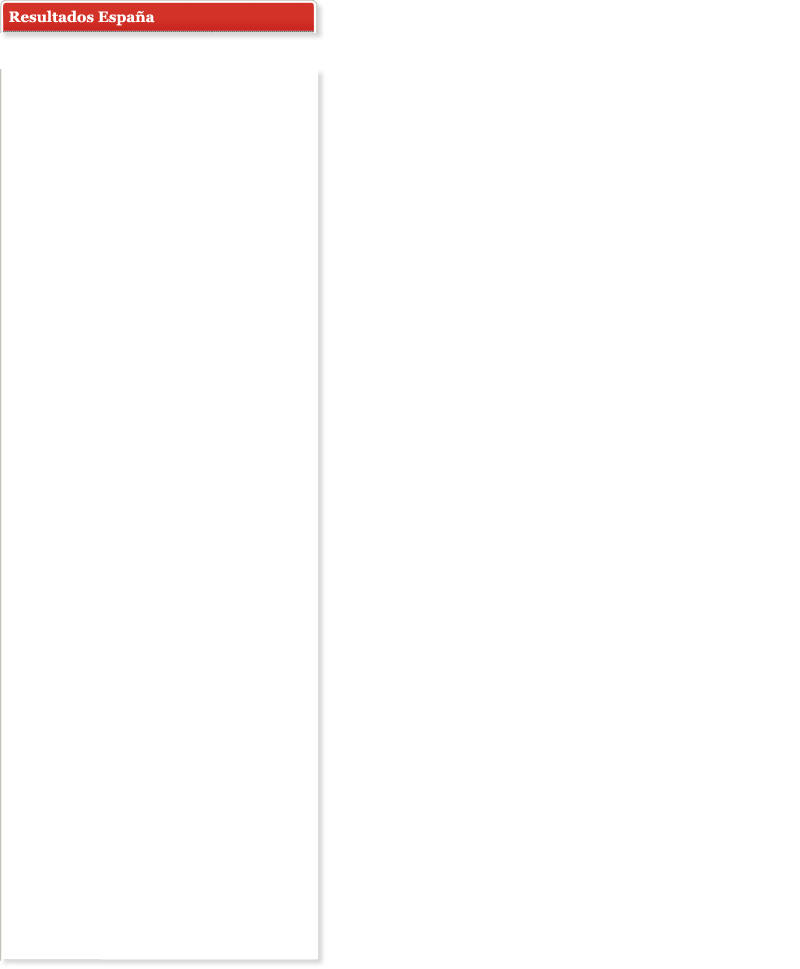
<style>
.page{position:relative;width:800px;height:969px;background:#ffffff}
.page>*{position:absolute;margin:0}
.t1{font:15px "Georgia-Bold";color:#ffffff}
</style>
<div class="page">
<p class="t1" style="left:9px;top:10px;width:146px;height:16px">Resultados España</p>
</div>
